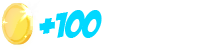
<style>
.page{position:relative;width:200px;height:50px;background:#ffffff}
.page>*{position:absolute;margin:0}
.t1{font:36px "BadaBoomBB";color:#00d8ff}
.t2{font:48px "BadaBoomBB";color:#00d8ff}
</style>
<div class="page">
<p class="t1" style="left:55px;top:10px;width:47px;height:28px">100</p>
<p class="t2" style="left:39px;top:18px;width:16px;height:16px">+</p>
</div>
